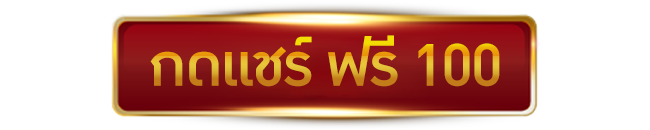
<style>
.page{position:relative;width:650px;height:130px;background:#ffffff}
.page>*{position:absolute;margin:0}
.t1{font:83.2px "DBOzoneX-Medium";letter-spacing:-0.02em}
</style>
<div class="page">
<p class="t1" style="left:150px;top:35px;width:350px;height:52px">กดแชร์ ฟรี 100</p>
</div>
